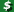
<style>
.page{position:relative;width:14px;height:12px;background:#197b30}
.page>*{position:absolute;margin:0}
.t1{font:11px "Verdana-BoldItalic";letter-spacing:0.02em;color:#ffffff}
</style>
<div class="page">
<p class="t1" style="left:3px;top:0px;width:8px;height:11px">$</p>
</div>
